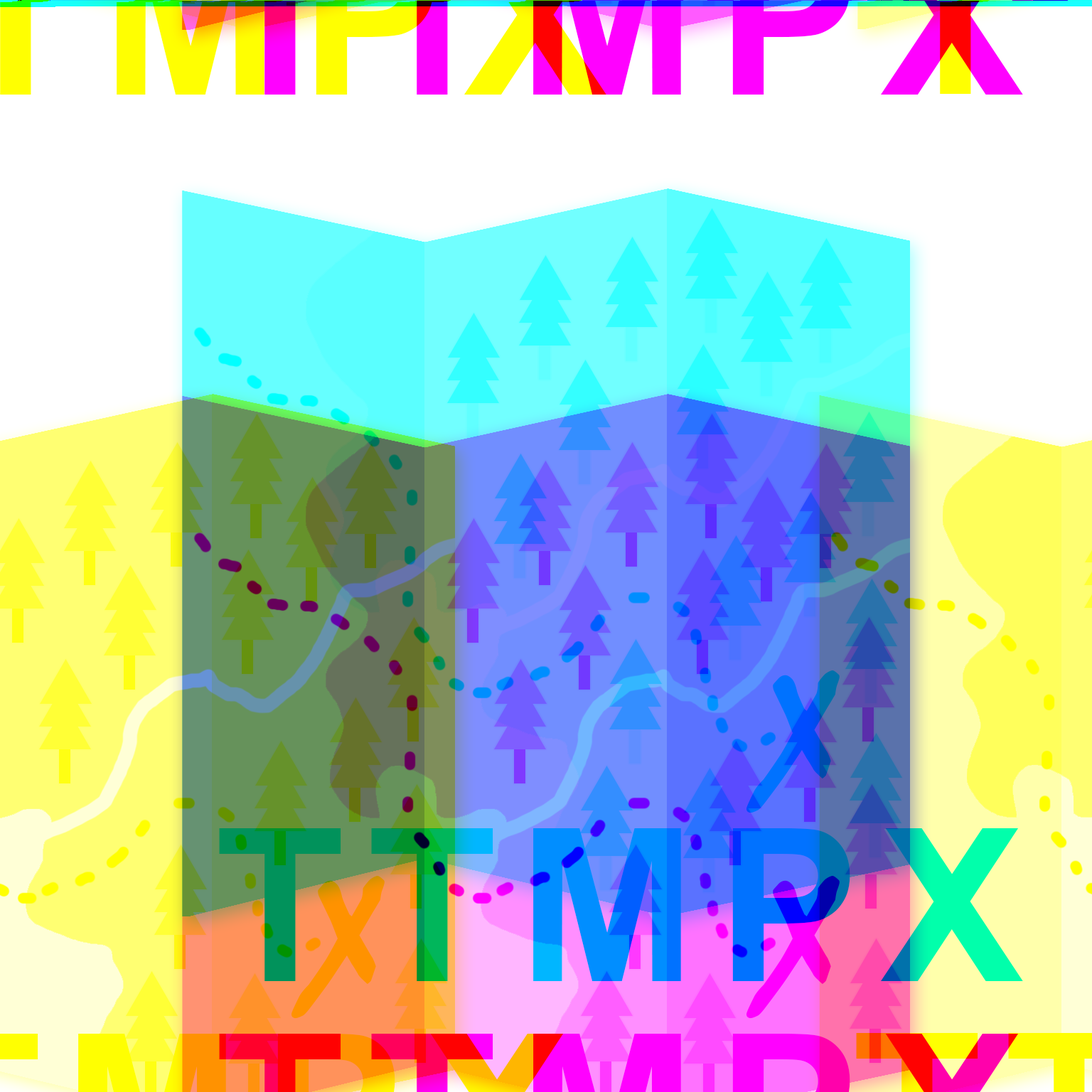
<style>
.page{position:relative;width:1092px;height:1092px}
.page>*{position:absolute;margin:0}
.t1{font:213.3px "Arial-BoldMT";letter-spacing:0.1em}
</style>
<div class="page">
<p class="t1" style="left:219px;top:822px;width:804px;height:153px">TTMPX</p>
</div>
